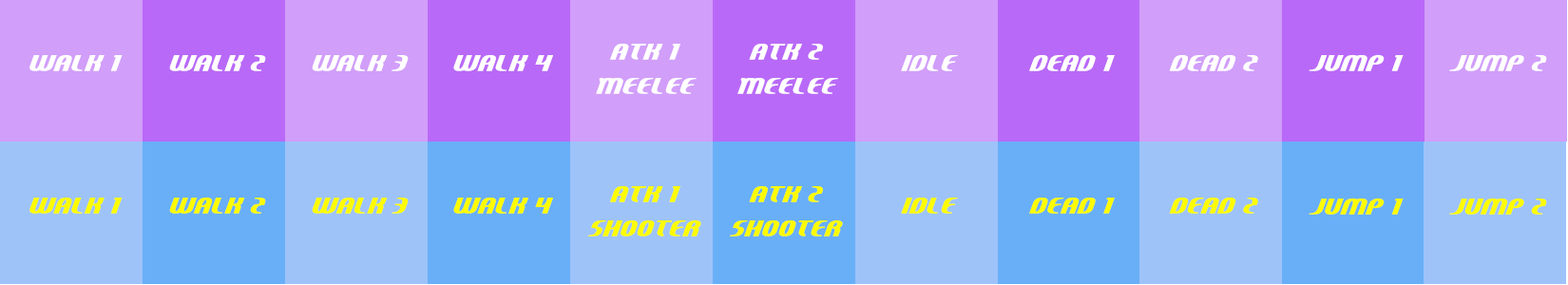
<style>
.page{position:relative;width:1568px;height:285px;background:#9ec3f9}
.page>*{position:absolute;margin:0}
.t1{font:28.5px "Centaurus";color:#ffffff}
.t2{font:28.5px "Centaurus";color:#fffc00}
</style>
<div class="page">
<p class="t1" style="left:596px;top:43px;width:101px;height:51px;text-align:center">atk 1<br>MEeLee</p>
<p class="t1" style="left:737px;top:43px;width:101px;height:51px;text-align:center">atk 2<br>MEeLee</p>
<p class="t1" style="left:29px;top:54px;width:94px;height:17px">walk 1</p>
<p class="t1" style="left:169px;top:54px;width:97px;height:17px">walk 2</p>
<p class="t1" style="left:312px;top:54px;width:97px;height:17px">walk 3</p>
<p class="t1" style="left:453px;top:54px;width:100px;height:17px">walk 4</p>
<p class="t1" style="left:901px;top:54px;width:57px;height:17px">idle</p>
<p class="t1" style="left:1029px;top:54px;width:86px;height:17px">dead 1</p>
<p class="t1" style="left:1169px;top:54px;width:89px;height:17px">dead 2</p>
<p class="t1" style="left:1309px;top:54px;width:95px;height:17px">jump 1</p>
<p class="t1" style="left:1449px;top:54px;width:98px;height:17px">jump 2</p>
<p class="t2" style="left:588px;top:185px;width:113px;height:52px;text-align:center">atk 1<br>Shooter</p>
<p class="t2" style="left:730px;top:185px;width:113px;height:52px;text-align:center">atk 2<br>Shooter</p>
<p class="t2" style="left:29px;top:197px;width:94px;height:17px">walk 1</p>
<p class="t2" style="left:169px;top:197px;width:97px;height:17px">walk 2</p>
<p class="t2" style="left:312px;top:197px;width:97px;height:17px">walk 3</p>
<p class="t2" style="left:453px;top:197px;width:100px;height:17px">walk 4</p>
<p class="t2" style="left:901px;top:197px;width:57px;height:17px">idle</p>
<p class="t2" style="left:1029px;top:197px;width:86px;height:17px">dead 1</p>
<p class="t2" style="left:1169px;top:197px;width:89px;height:17px">dead 2</p>
<p class="t2" style="left:1309px;top:198px;width:95px;height:17px">jump 1</p>
<p class="t2" style="left:1449px;top:198px;width:98px;height:17px">jump 2</p>
</div>
